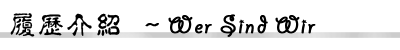
<style>
.page{position:relative;width:400px;height:50px;background:#ffffff}
.page>*{position:absolute;margin:0}
.t1{font:27px "GiddyupStd";letter-spacing:0.06em;color:#000000;font-weight:bold}
.t2{font:27px "¾­µä·±µ­¹Å Regular";letter-spacing:0.06em;color:#000000}
.t3{font:27px "¾­µä·±µ­¹Å Regular";letter-spacing:0.06em;color:#000000;font-weight:bold}
</style>
<div class="page">
<p class="t1" style="left:10px;top:13px;width:306px;height:24px"><span class="t2">履历介绍 </span><span class="t3">～</span>Wer Sind Wir</p>
</div>
